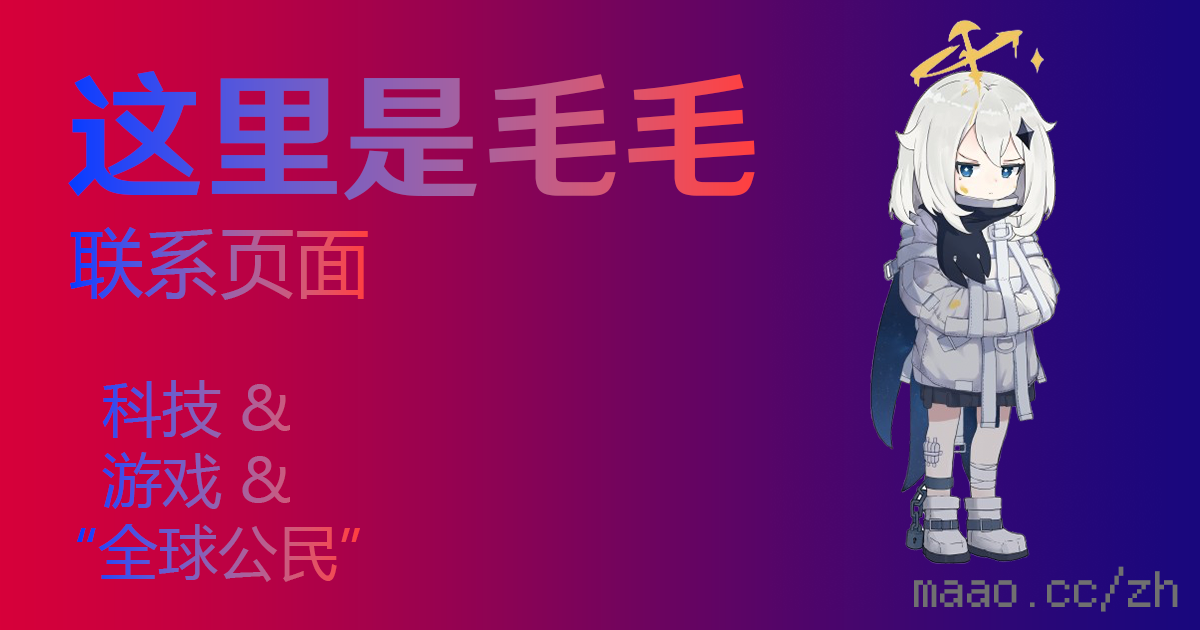
<style>
.page{position:relative;width:1200px;height:630px}
.page>*{position:absolute;margin:0}
.t1{font:138.8px "HYWenHei-HEW"}
.t2{font:75.4px "MicrosoftYaHei"}
.t3{font:59.9px "MicrosoftYaHei"}
.t4{font:53.5px "ZLabsBitmap_11x12px";color:#707070}
</style>
<div class="page">
<p class="t1" style="left:68px;top:70px;width:687px;height:131px">这里是毛毛</p>
<p class="t2" style="left:70px;top:227px;width:298px;height:73px">联系页面</p>
<p class="t3" style="left:77px;top:380px;width:283px;height:202px;text-align:right">科技 &amp;      <br>游戏 &amp;      <br>“全球公民”</p>
<p class="t4" style="left:914px;top:566px;width:264px;height:46px">maao.cc/zh</p>
</div>
